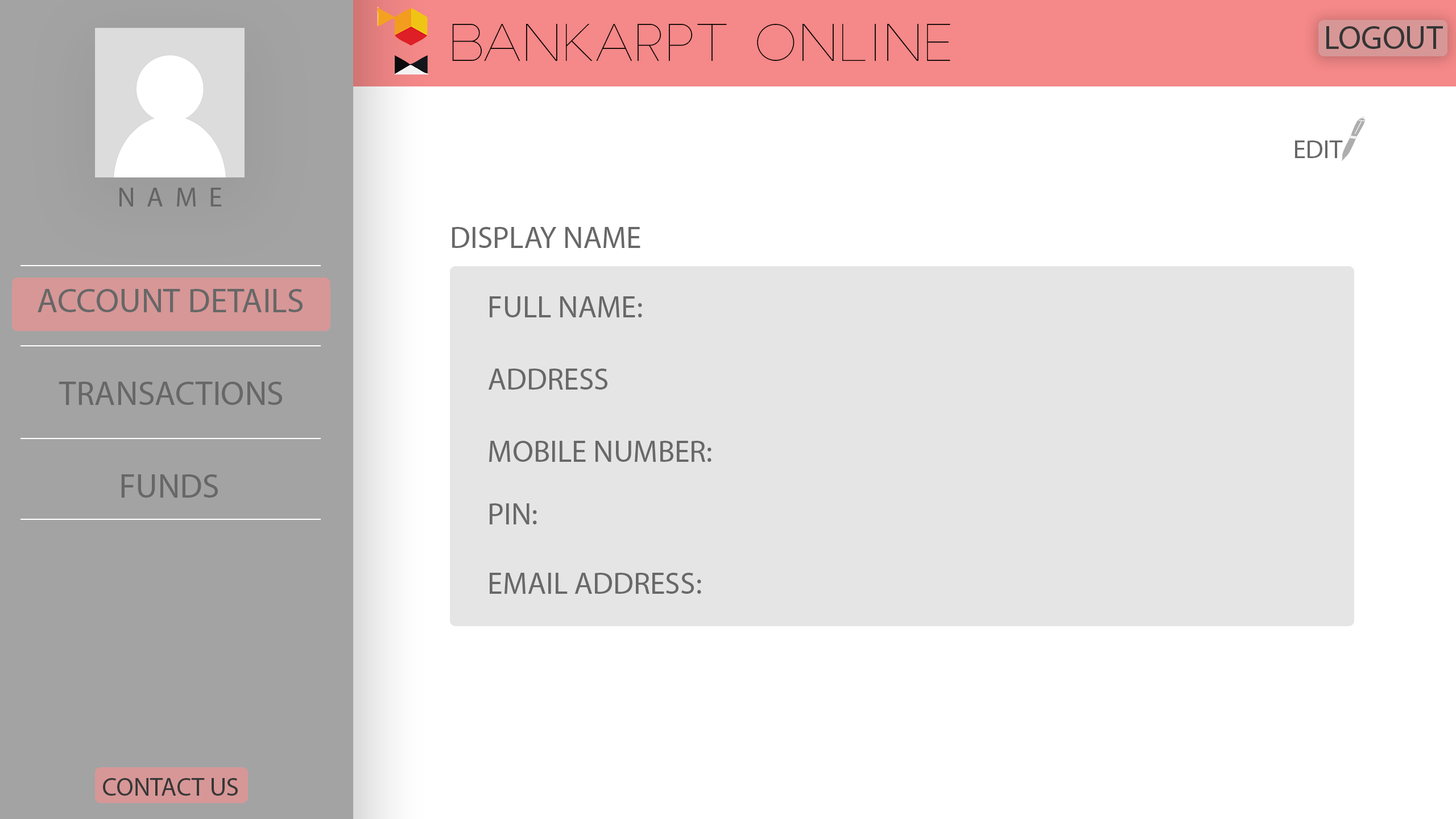
<style>
.page{position:relative;width:1456px;height:819px;background:#ffffff}
.page>*{position:absolute;margin:0}
.t1{font:25.9px "MyriadPro-Regular";color:#686868}
.t2{font:30.6px "MyriadPro-Regular";color:#686868}
</style>
<div class="page">
<p class="t1" style="left:1295px;top:140px;width:48px;height:18px">EDIT</p>
<p class="t2" style="left:452px;top:227px;width:188px;height:21px">DISPLAY NAME</p>
<p class="t2" style="left:490px;top:296px;width:152px;height:21px">FULL NAME:</p>
<p class="t2" style="left:488px;top:369px;width:119px;height:21px">ADDRESS</p>
<p class="t2" style="left:489px;top:441px;width:222px;height:21px">MOBILE NUMBER:</p>
<p class="t2" style="left:490px;top:503px;width:47px;height:21px">PIN:</p>
<p class="t2" style="left:490px;top:573px;width:211px;height:21px">EMAIL ADDRESS:</p>
</div>
